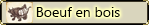
<style>
.page{position:relative;width:149px;height:25px;background:#d9d5bd}
.page>*{position:absolute;margin:0}
.t1{font:14px "LaoUI";color:#000000}
</style>
<div class="page">
<p class="t1" style="left:36px;top:7px;width:84px;height:10px">Boeuf en bois</p>
</div>
